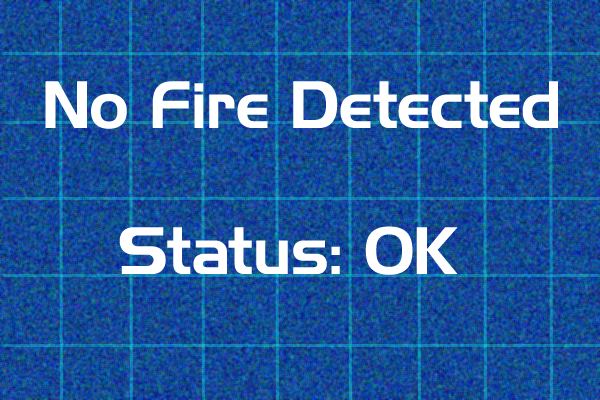
<style>
.page{position:relative;width:600px;height:400px}
.page>*{position:absolute;margin:0}
.t1{font:60px "HighlandGothicFLF";letter-spacing:0.005em;color:#ffffff}
</style>
<div class="page">
<p class="t1" style="left:45px;top:81px;width:513px;height:48px">No Fire Detected</p>
<p class="t1" style="left:119px;top:226px;width:339px;height:49px">Status: OK</p>
</div>
